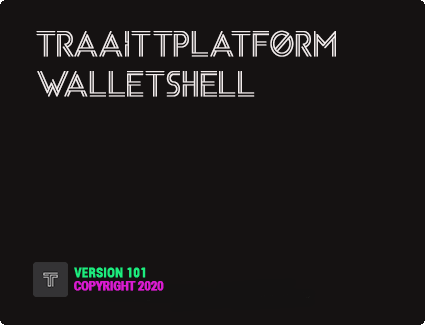
<style>
.page{position:relative;width:425px;height:325px;background:#151212}
.page>*{position:absolute;margin:0}
.t1{font:33.5px "Arenq";color:#f2ecec;font-weight:bold;scale:0.87 1}
.t2{font:13px "Roboto-Black";color:#1ced7e;font-weight:bold;scale:0.87 1}
.t3{font:12.1px "Roboto-Black";color:#ec1ce2;font-weight:bold;scale:0.87 1}
</style>
<div class="page">
<p class="t1" style="left:36px;top:30px;width:300px;height:67px;text-align:center">traaittPlatform<br>WalletSHELL</p>
<p class="t2" style="left:74px;top:267px;width:72px;height:11px">VERSION 101</p>
<p class="t3" style="left:74px;top:281px;width:90px;height:10px;opacity:0.88">COPYRIGHT 2020</p>
</div>
